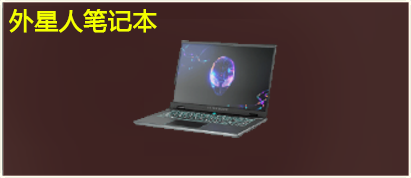
<style>
.page{position:relative;width:411px;height:178px}
.page>*{position:absolute;margin:0}
.t1{font:24px "MicrosoftYaHei";color:#f4ff00;font-weight:bold}
</style>
<div class="page">
<p class="t1" style="left:9px;top:9px;width:148px;height:24px">外星人笔记本</p>
</div>
